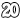
<style>
.page{position:relative;width:20px;height:20px;background:#ffffff}
.page>*{position:absolute;margin:0}
.t1{font:16px "HoboStd";letter-spacing:-0.1em;color:#fefefe;font-weight:bold}
</style>
<div class="page">
<p class="t1" style="left:2px;top:3px;width:17px;height:14px">20</p>
</div>
